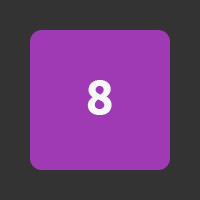
<style>
.page{position:relative;width:200px;height:200px;background:#333333}
.page>*{position:absolute;margin:0}
.t1{font:48px "Ubuntu-Bold";color:#f7f7f7}
</style>
<div class="page">
<p class="t1" style="left:87px;top:80px;width:25px;height:35px">8</p>
</div>
